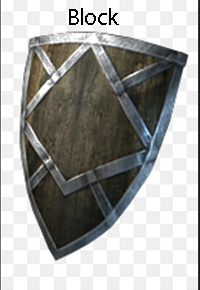
<style>
.page{position:relative;width:200px;height:290px;background:#ffffff}
.page>*{position:absolute;margin:0}
.t1{font:23.7px "MyriadPro-Regular";letter-spacing:-0.025em;color:#000000}
</style>
<div class="page">
<p class="t1" style="left:69px;top:8px;width:50px;height:17px">Block</p>
</div>
